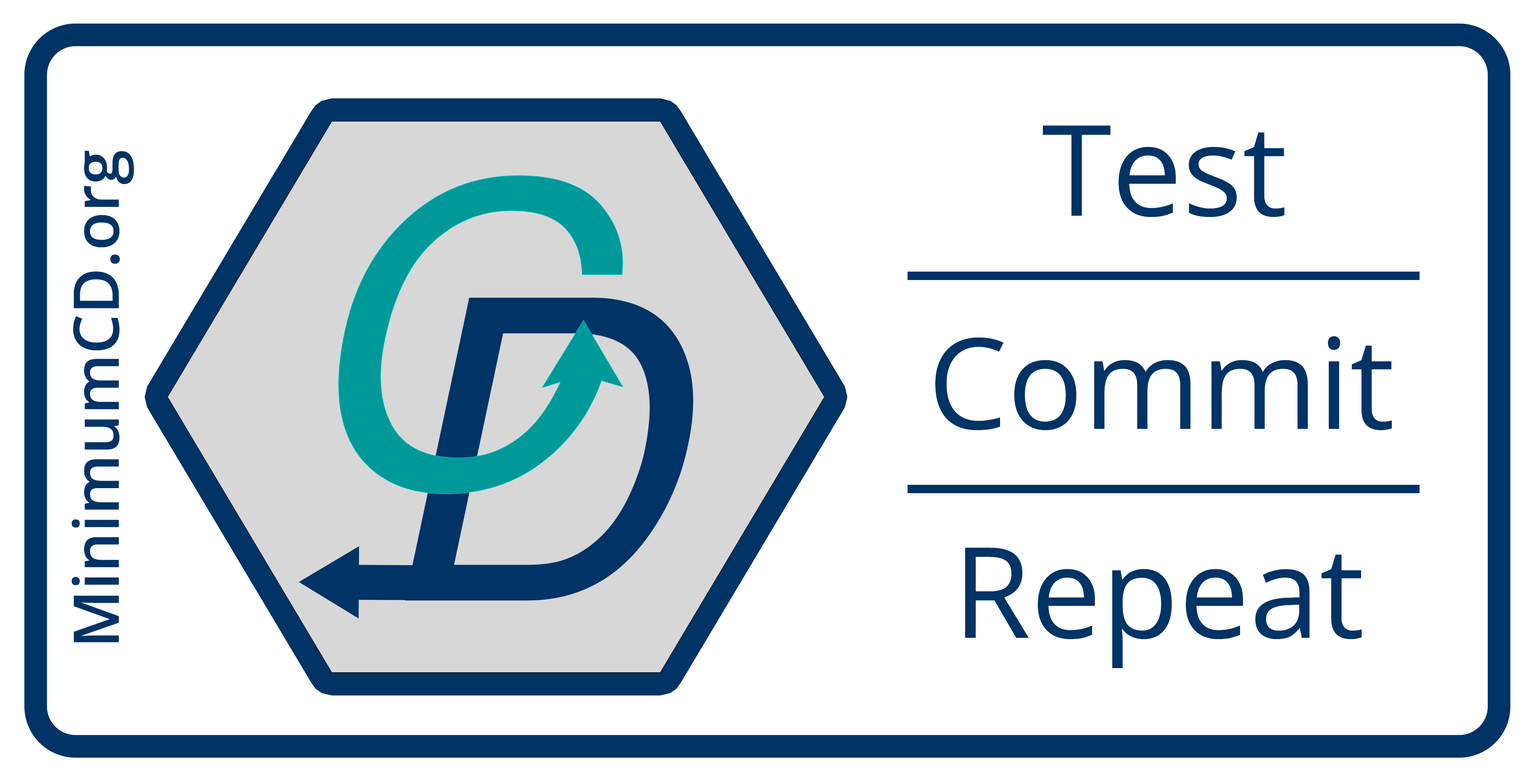
<style>
.page{position:relative;width:1536px;height:777px;background:#ffffff}
.page>*{position:absolute;margin:0}
.t1{font:126.1px "OpenSans-Regular";color:#003366}
.t2{font:63px "OpenSans-SemiBold";color:#003366}
</style>
<div class="page">
<p class="t1" style="left:1042px;top:125px;width:242px;height:92px">Test</p>
<p class="t2" style="left:71px;top:150px;width:63px;height:492px;rotate:-90deg">MinimumCD.org</p>
<p class="t1" style="left:935px;top:336px;width:456px;height:94px">Commit</p>
<p class="t1" style="left:965px;top:547px;width:397px;height:121px">Repeat</p>
</div>
